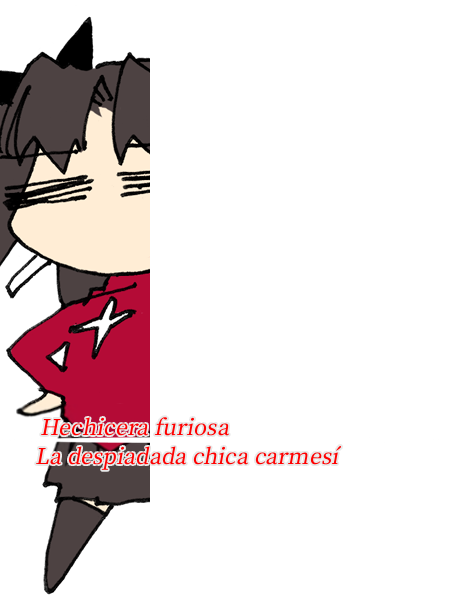
<style>
.page{position:relative;width:450px;height:600px;background:#ffffff}
.page>*{position:absolute;margin:0}
.t1{font:26px "OfficialFateFont-Medium";color:#ff0000;font-style:italic}
</style>
<div class="page">
<p class="t1" style="left:41px;top:417px;width:189px;height:19px">Hechicera furiosa</p>
<p class="t1" style="left:36px;top:446px;width:306px;height:24px">La despiadada chica carmesí</p>
</div>
